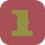
<style>
.page{position:relative;width:45px;height:45px;background:#a75157}
.page>*{position:absolute;margin:0}
.t1{font:50px "Saddlebag-Black";color:#949146}
</style>
<div class="page">
<p class="t1" style="left:11px;top:10px;width:22px;height:26px">1</p>
</div>
